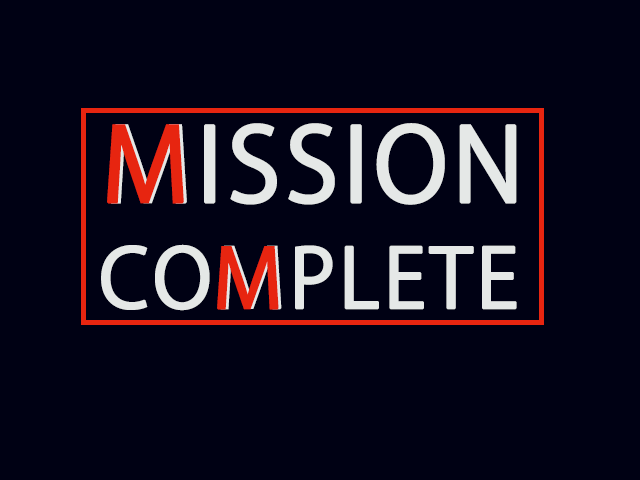
<style>
.page{position:relative;width:640px;height:480px;background:#000114}
.page>*{position:absolute;margin:0}
.t1{font:100px "KozGoPr6N-Regular";letter-spacing:0.025em;color:#e72510;font-weight:bold}
.t2{font:100px "KozGoPr6N-Regular";letter-spacing:0.025em;color:#e5e8e7;font-weight:bold}
.t3{font:80px "KozGoPr6N-Regular";letter-spacing:0.025em;color:#e5e8e7;font-weight:bold}
.t4{font:80px "KozGoPr6N-Regular";letter-spacing:0.025em;color:#e72510;font-weight:bold}
</style>
<div class="page">
<p class="t1" style="left:107px;top:124px;width:77px;height:80px">M</p>
<p class="t2" style="left:110px;top:123px;width:407px;height:82px">MISSION</p>
<p class="t3" style="left:101px;top:244px;width:416px;height:67px">COMPLETE</p>
<p class="t4" style="left:217px;top:246px;width:62px;height:64px">M</p>
</div>
